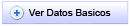
<style>
.page{position:relative;width:130px;height:26px}
.page>*{position:absolute;margin:0}
.t1{font:10px "ArialMT";color:#000000}
</style>
<div class="page">
<p class="t1" style="left:28px;top:9px;width:83px;height:7px">Ver Datos Basicos</p>
</div>
